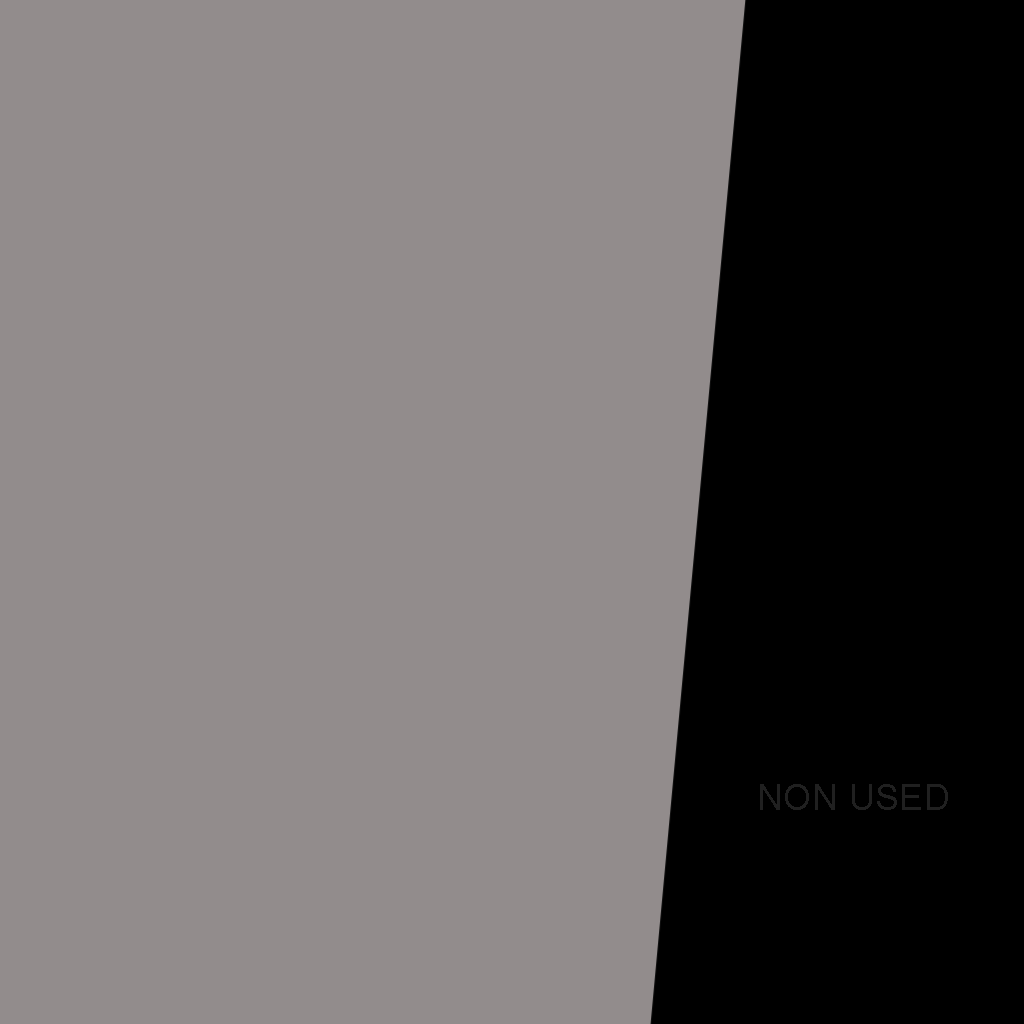
<style>
.page{position:relative;width:1024px;height:1024px;background:#928c8c}
.page>*{position:absolute;margin:0}
.t1{font:36.1px "ArialMT";letter-spacing:0.01em;color:#202020}
</style>
<div class="page">
<p class="t1" style="left:760px;top:784px;width:188px;height:26px">NON USED</p>
</div>
